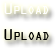
<style>
.page{position:relative;width:56px;height:48px;background:#ffffff}
.page>*{position:absolute;margin:0}
.t1{font:17px "OCRAExtended";color:#ffffff;font-variant:small-caps}
.t2{font:17px "OCRAExtended";color:#000000;font-variant:small-caps}
</style>
<div class="page">
<p class="t1" style="left:4px;top:3px;width:45px;height:11px">Upload</p>
<p class="t2" style="left:4px;top:29px;width:45px;height:11px">Upload</p>
</div>
